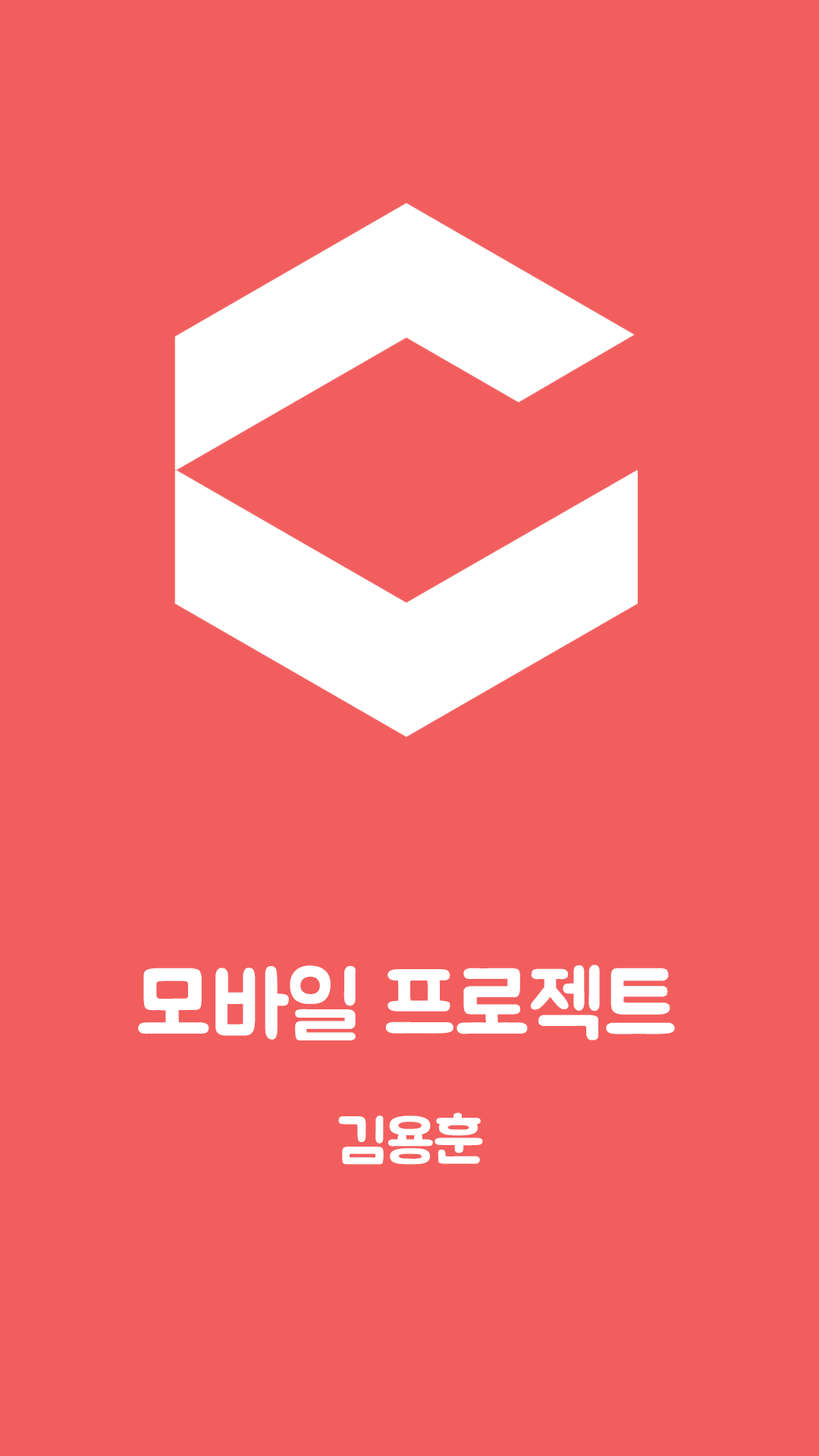
<style>
.page{position:relative;width:819px;height:1456px;background:#f25e5e}
.page>*{position:absolute;margin:0}
.t1{font:91px "BMJUA";color:#ffffff}
.t2{font:60.7px "BMJUA";color:#ffffff}
</style>
<div class="page">
<p class="t1" style="left:138px;top:965px;width:537px;height:75px">모바일 프로젝트</p>
<p class="t2" style="left:338px;top:1112px;width:145px;height:53px">김용훈</p>
</div>
